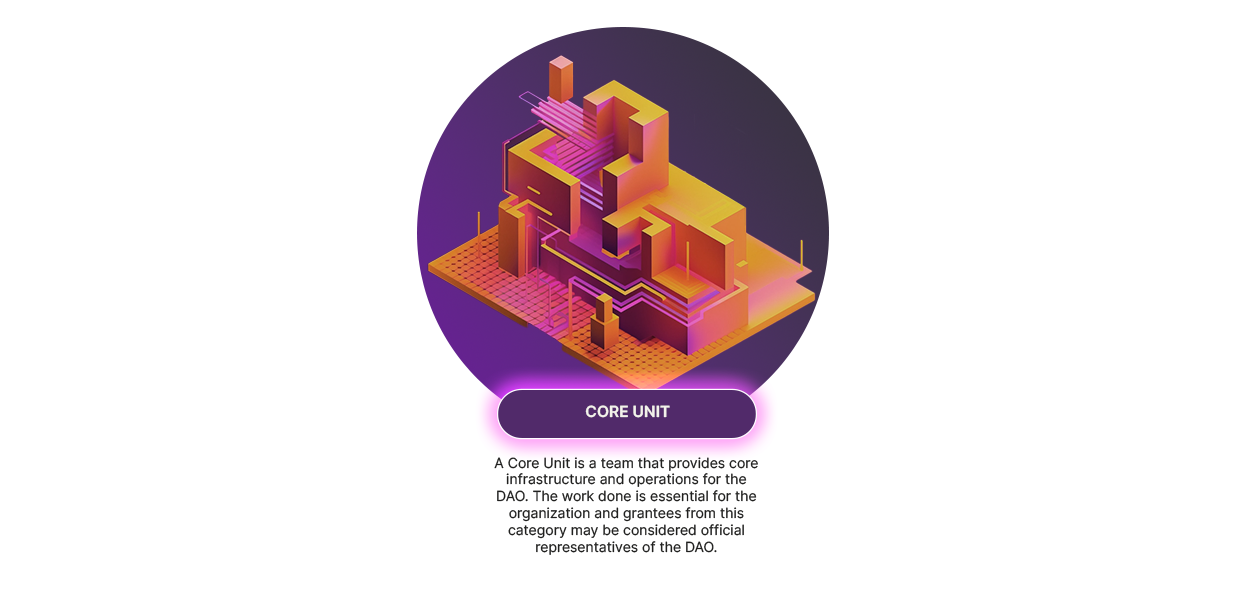
<style>
.page{position:relative;width:1240px;height:600px;background:#ffffff}
.page>*{position:absolute;margin:0}
.t1{font:15.4px "Inter-SemiBold";color:#f3f2eb;text-transform:uppercase}
.t2{font:14px "Inter-Regular";color:#20201f}
</style>
<div class="page">
<p class="t1" style="left:585px;top:405px;width:85px;height:13px">Core Unit</p>
<p class="t2" style="left:494px;top:457px;width:264px;height:98px;text-align:center">A Core Unit is a team that provides core infrastructure and operations for the DAO. The work done is essential for the organization and grantees from this category may be considered official representatives of the DAO.</p>
</div>
